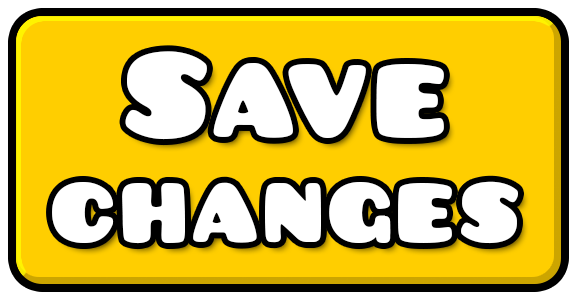
<style>
.page{position:relative;width:579px;height:300px;background:#ffce00}
.page>*{position:absolute;margin:0}
.t1{font:104px/105px "Pusab";letter-spacing:0.04em;color:#ffffff}
.t2{font:130px/105px "Pusab";letter-spacing:0.04em;color:#ffffff}
</style>
<div class="page">
<p class="t1" style="left:52px;top:51px;width:466px;height:193px;text-align:center"><span class="t2">Save<br></span>changes</p>
</div>
